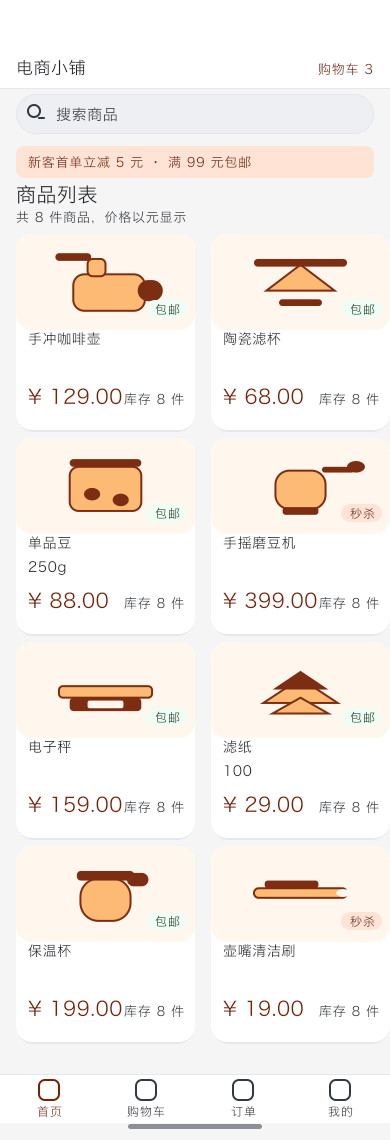
<style>
.page{position:relative;width:390px;height:1140px;background:#ffffff}
.page>*{position:absolute;margin:0}
.t1{font:17px "HiraginoSansGB-Regular";letter-spacing:0.03em;color:#1f2329}
.t2{font:13px "HiraginoSansGB-Regular";letter-spacing:0.06em;color:#7f2e12}
.t3{font:15px "HiraginoSansGB-Regular";letter-spacing:0.04em;color:#333940}
.t4{font:13px "HiraginoSansGB-Regular";letter-spacing:0.06em;color:#7d2908}
.t5{font:20px "HiraginoSansGB-Regular";letter-spacing:0.024em;color:#21252b}
.t6{font:13px "HiraginoSansGB-Regular";letter-spacing:0.06em;color:#363b42}
.t7{font:12px "HiraginoSansGB-Regular";letter-spacing:0.08em}
.t8{font:14px "HiraginoSansGB-Regular";letter-spacing:0.045em;color:#33363b}
.t9{font:14px "HiraginoSansGB-Regular";letter-spacing:0.045em;color:#2e3136}
.t10{font:20px "HiraginoSansGB-Regular";letter-spacing:0.024em;color:#7a2200}
.t11{font:13px "HiraginoSansGB-Regular";letter-spacing:0.06em;color:#474c51}
.t12{font:12px "HiraginoSansGB-Regular";letter-spacing:0.08em;color:#79331b}
.t13{font:14px "HiraginoSansGB-Regular";letter-spacing:0.045em;color:#36393e}
.t14{font:14px "HiraginoSansGB-Regular";letter-spacing:0.045em;color:#33373b}
.t15{font:14px "HiraginoSansGB-Regular";letter-spacing:0.045em;color:#272b30}
.t16{font:14px "HiraginoSansGB-Regular";letter-spacing:0.045em;color:#2a2d33}
.t17{font:14px "HiraginoSansGB-Regular";letter-spacing:0.045em;color:#282c31}
.t18{font:14px "HiraginoSansGB-Regular";letter-spacing:0.045em;color:#2c2f34}
.t19{font:14px "HiraginoSansGB-Regular";letter-spacing:0.045em;color:#1f2329}
.t20{font:14px "HiraginoSansGB-Regular";letter-spacing:0.045em;color:#3b3e42}
.t21{font:12px "HiraginoSansGB-Regular";letter-spacing:0.08em;color:#43484e}
</style>
<div class="page">
<p class="t1" style="left:17px;top:59px;width:69px;height:18px">电商小铺</p>
<p class="t2" style="left:317px;top:63px;width:57px;height:14px">购物车 3</p>
<p class="t3" style="left:55px;top:107px;width:63px;height:16px">搜索商品</p>
<p class="t4" style="left:27px;top:155px;width:225px;height:15px">新客首单立减 5 元 · 满 99 元包邮</p>
<p class="t5" style="left:16px;top:185px;width:82px;height:20px">商品列表</p>
<p class="t6" style="left:15px;top:211px;width:172px;height:14px">共 8 件商品，价格以元显示</p>
<p class="t7" style="left:154px;top:303px;width:27px;height:13px">包邮</p>
<p class="t7" style="left:349px;top:303px;width:27px;height:13px">包邮</p>
<p class="t8" style="left:27px;top:332px;width:74px;height:14px">手冲咖啡壶</p>
<p class="t9" style="left:223px;top:332px;width:59px;height:15px">陶瓷滤杯</p>
<p class="t10" style="left:27px;top:388px;width:96px;height:18px">¥ 129.00</p>
<p class="t10" style="left:222px;top:388px;width:82px;height:18px">¥ 68.00</p>
<p class="t11" style="left:123px;top:392px;width:62px;height:15px">库存 8 件</p>
<p class="t11" style="left:318px;top:392px;width:62px;height:15px">库存 8 件</p>
<p class="t7" style="left:154px;top:507px;width:27px;height:13px">包邮</p>
<p class="t12" style="left:349px;top:507px;width:27px;height:13px">秒杀</p>
<p class="t13" style="left:27px;top:536px;width:45px;height:15px">单品豆</p>
<p class="t14" style="left:222px;top:536px;width:75px;height:15px">手摇磨豆机</p>
<p class="t15" style="left:27px;top:561px;width:40px;height:15px">250g</p>
<p class="t10" style="left:27px;top:592px;width:82px;height:18px">¥ 88.00</p>
<p class="t10" style="left:222px;top:592px;width:96px;height:18px">¥ 399.00</p>
<p class="t11" style="left:123px;top:596px;width:62px;height:15px">库存 8 件</p>
<p class="t11" style="left:318px;top:596px;width:62px;height:15px">库存 8 件</p>
<p class="t7" style="left:154px;top:711px;width:27px;height:13px">包邮</p>
<p class="t7" style="left:349px;top:711px;width:27px;height:13px">包邮</p>
<p class="t16" style="left:28px;top:740px;width:44px;height:15px">电子秤</p>
<p class="t17" style="left:222px;top:740px;width:31px;height:14px">滤纸</p>
<p class="t18" style="left:224px;top:765px;width:29px;height:13px">100</p>
<p class="t10" style="left:27px;top:796px;width:96px;height:18px">¥ 159.00</p>
<p class="t10" style="left:222px;top:796px;width:82px;height:18px">¥ 29.00</p>
<p class="t11" style="left:123px;top:800px;width:62px;height:15px">库存 8 件</p>
<p class="t11" style="left:318px;top:800px;width:62px;height:15px">库存 8 件</p>
<p class="t7" style="left:154px;top:915px;width:27px;height:13px">包邮</p>
<p class="t12" style="left:349px;top:915px;width:27px;height:13px">秒杀</p>
<p class="t19" style="left:27px;top:944px;width:45px;height:15px">保温杯</p>
<p class="t20" style="left:222px;top:944px;width:74px;height:15px">壶嘴清洁刷</p>
<p class="t10" style="left:27px;top:1000px;width:96px;height:18px">¥ 199.00</p>
<p class="t10" style="left:222px;top:1000px;width:82px;height:18px">¥ 19.00</p>
<p class="t11" style="left:123px;top:1004px;width:62px;height:15px">库存 8 件</p>
<p class="t11" style="left:318px;top:1004px;width:62px;height:15px">库存 8 件</p>
<p class="t7" style="left:36px;top:1105px;width:27px;height:13px">首页</p>
<p class="t21" style="left:126px;top:1105px;width:40px;height:13px">购物车</p>
<p class="t7" style="left:230px;top:1106px;width:27px;height:12px">订单</p>
<p class="t7" style="left:327px;top:1106px;width:27px;height:12px">我的</p>
</div>
